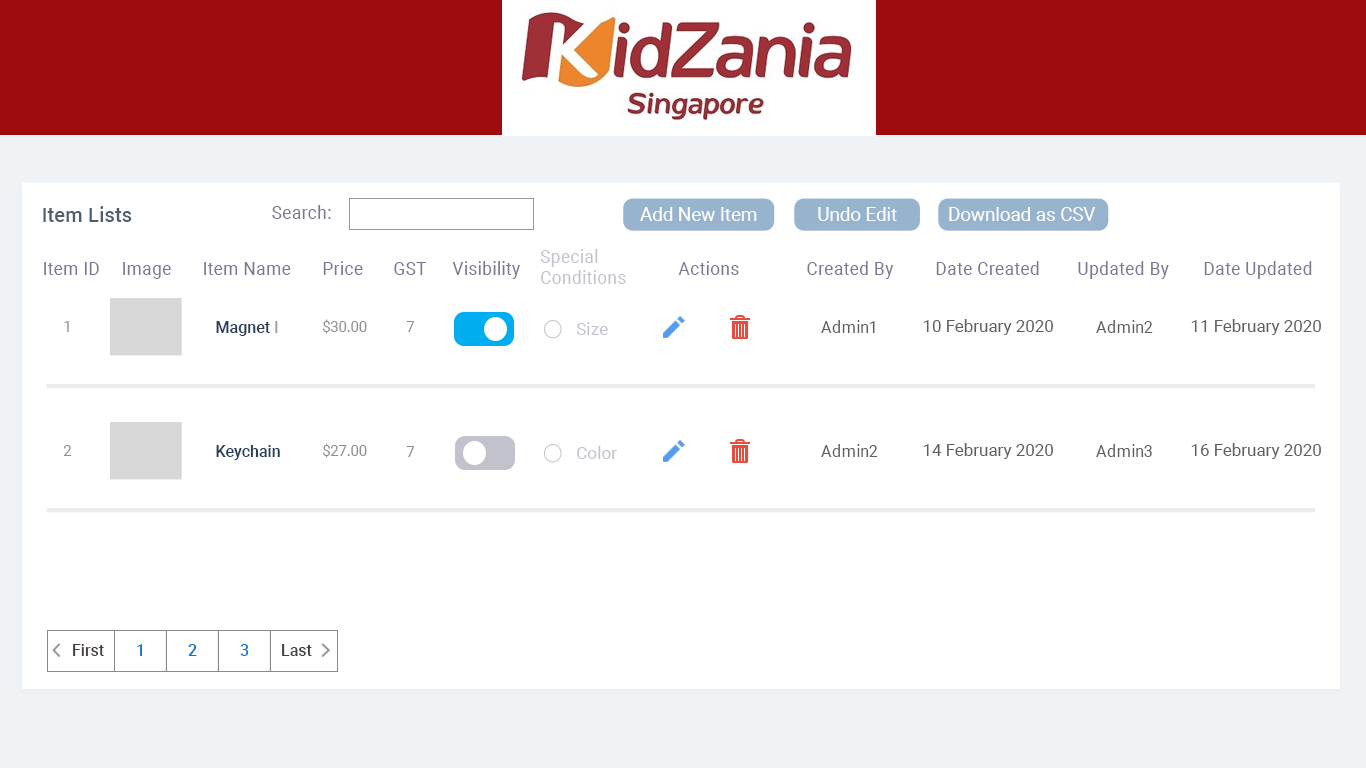
<style>
.page{position:relative;width:1366px;height:768px;background:#ffffff}
.page>*{position:absolute;margin:0}
.t1{font:20.4px "Roboto-Medium";color:#4f5f6f}
.t2{font:17.5px "Roboto-Regular";letter-spacing:0.017em;color:#787993}
.t3{font:18.7px "Roboto-Regular";color:#ffffff}
.t4{font:17.5px "Roboto-Regular";letter-spacing:0.017em;color:#c2c2cd}
.t5{font:14.6px "Roboto-Regular"}
.t6{font:16.1px "Roboto-Medium";color:#28405c}
.t7{font:16.1px "Roboto-Medium";color:#9a9ea2}
.t8{font:14.6px "Roboto-Regular";color:#8e8f90}
.t9{font:16.8px "Roboto-Regular";letter-spacing:0.017em;color:#c2c2cd}
.t10{font:16.8px "Roboto-Regular";color:#5f5f5f}
.t11{font:16.8px "Roboto-Regular";letter-spacing:0.005em;color:#5f5f5f}
.t12{font:16px "Roboto-Medium";color:#483f3f}
.t13{font:16px "Roboto-Medium";color:#1577c9}
</style>
<div class="page">
<p class="t1" style="left:43px;top:206px;width:89px;height:16px">Item Lists</p>
<p class="t2" style="left:272px;top:205px;width:59px;height:14px">Search:</p>
<p class="t3" style="left:640px;top:207px;width:456px;height:14px">Add New Item             Undo Edit           Download as CSV</p>
<p class="t4" style="left:540px;top:249px;width:86px;height:35px">Special <br>Conditions</p>
<p class="t2" style="left:44px;top:262px;width:55px;height:13px">Item ID</p>
<p class="t2" style="left:123px;top:262px;width:48px;height:17px">Image</p>
<p class="t2" style="left:204px;top:262px;width:87px;height:13px">Item Name</p>
<p class="t2" style="left:323px;top:261px;width:40px;height:14px">Price</p>
<p class="t2" style="left:394px;top:262px;width:33px;height:13px">GST</p>
<p class="t2" style="left:452px;top:261px;width:68px;height:18px">Visibility</p>
<p class="t2" style="left:678px;top:261px;width:61px;height:14px">Actions</p>
<p class="t2" style="left:807px;top:261px;width:87px;height:18px">Created By</p>
<p class="t2" style="left:936px;top:261px;width:103px;height:14px">Date Created</p>
<p class="t2" style="left:1078px;top:261px;width:91px;height:18px">Updated By</p>
<p class="t2" style="left:1204px;top:261px;width:108px;height:18px">Date Updated</p>
<p class="t5" style="left:64px;top:321px;width:5px;height:11px">1</p>
<p class="t6" style="left:216px;top:321px;width:62px;height:15px">Magnet <span class="t7">l</span></p>
<p class="t8" style="left:323px;top:319px;width:44px;height:15px">$30.00</p>
<p class="t8" style="left:406px;top:321px;width:9px;height:11px">7</p>
<p class="t9" style="left:576px;top:322px;width:32px;height:13px">Size</p>
<p class="t10" style="left:821px;top:320px;width:54px;height:13px">Admin1</p>
<p class="t11" style="left:923px;top:319px;width:130px;height:16px">10 February 2020</p>
<p class="t10" style="left:1096px;top:320px;width:57px;height:13px">Admin2</p>
<p class="t11" style="left:1191px;top:319px;width:130px;height:16px">11 February 2020</p>
<p class="t8" style="left:63px;top:445px;width:9px;height:11px">2</p>
<p class="t6" style="left:216px;top:445px;width:64px;height:15px">Keychain</p>
<p class="t8" style="left:323px;top:443px;width:44px;height:15px">$27.00</p>
<p class="t8" style="left:406px;top:446px;width:9px;height:11px">7</p>
<p class="t9" style="left:577px;top:446px;width:40px;height:13px">Color</p>
<p class="t10" style="left:821px;top:444px;width:57px;height:13px">Admin2</p>
<p class="t11" style="left:923px;top:443px;width:130px;height:16px">14 February 2020</p>
<p class="t10" style="left:1096px;top:444px;width:56px;height:13px">Admin3</p>
<p class="t11" style="left:1191px;top:443px;width:130px;height:16px">16 February 2020</p>
<p class="t12" style="left:73px;top:644px;width:31px;height:12px">First</p>
<p class="t13" style="left:137px;top:644px;width:6px;height:12px">1</p>
<p class="t13" style="left:188px;top:644px;width:9px;height:12px">2</p>
<p class="t13" style="left:240px;top:644px;width:9px;height:12px">3</p>
<p class="t12" style="left:282px;top:644px;width:30px;height:12px">Last</p>
</div>
